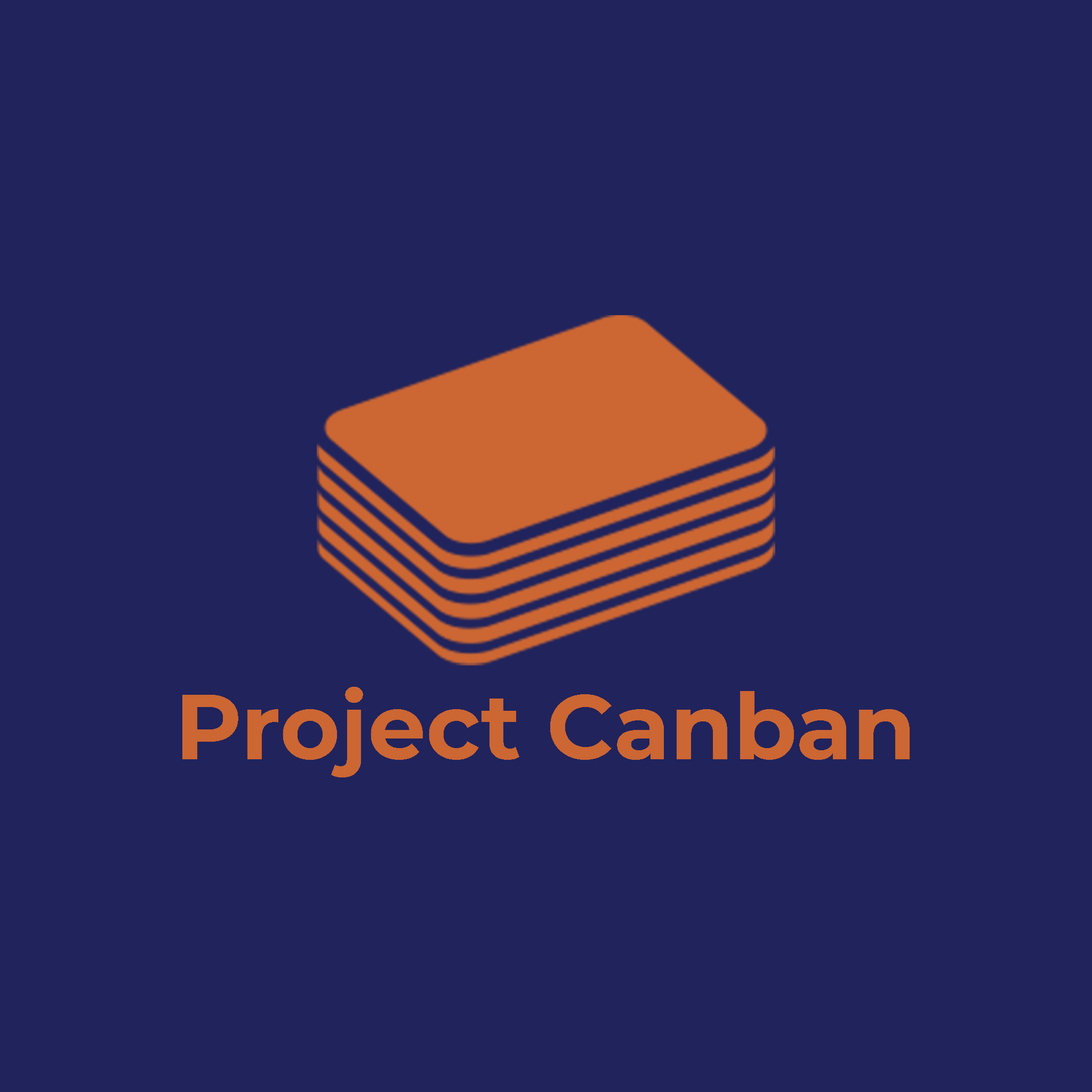
<style>
.page{position:relative;width:1092px;height:1092px;background:#21235c}
.page>*{position:absolute;margin:0}
.t1{font:91.7px "Montserrat-Bold";color:#cc6633}
</style>
<div class="page">
<p class="t1" style="left:182px;top:687px;width:728px;height:90px">Project Canban</p>
</div>
